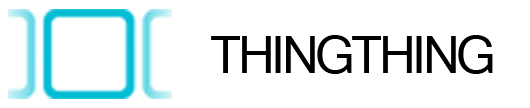
<style>
.page{position:relative;width:530px;height:108px;background:#ffffff}
.page>*{position:absolute;margin:0}
.t1{font:50.7px "MicrosoftSansSerif";letter-spacing:-0.065em;color:#000000}
</style>
<div class="page">
<p class="t1" style="left:211px;top:35px;width:282px;height:39px">THINGTHING</p>
</div>
